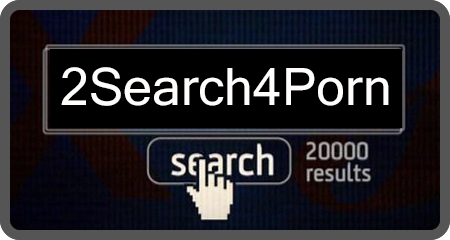
<style>
.page{position:relative;width:450px;height:240px;background:#000000}
.page>*{position:absolute;margin:0}
.t1{font:50px "Kartika";color:#fffcfc}
</style>
<div class="page">
<p class="t1" style="left:61px;top:67px;width:328px;height:39px">2Search4Porn</p>
</div>
